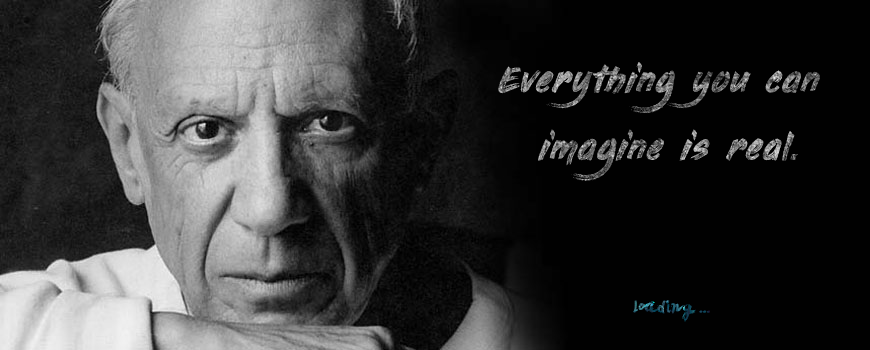
<style>
.page{position:relative;width:870px;height:350px;background:#010101}
.page>*{position:absolute;margin:0}
.t1{font:37.5px "PaintingWithChocolate"}
.t2{font:18.8px "LeviBrush"}
</style>
<div class="page">
<p class="t1" style="left:498px;top:62px;width:322px;height:52px">Everything you can</p>
<p class="t1" style="left:538px;top:129px;width:260px;height:52px">imagine is real.</p>
<p class="t2" style="left:633px;top:300px;width:77px;height:22px">loading ...</p>
</div>
